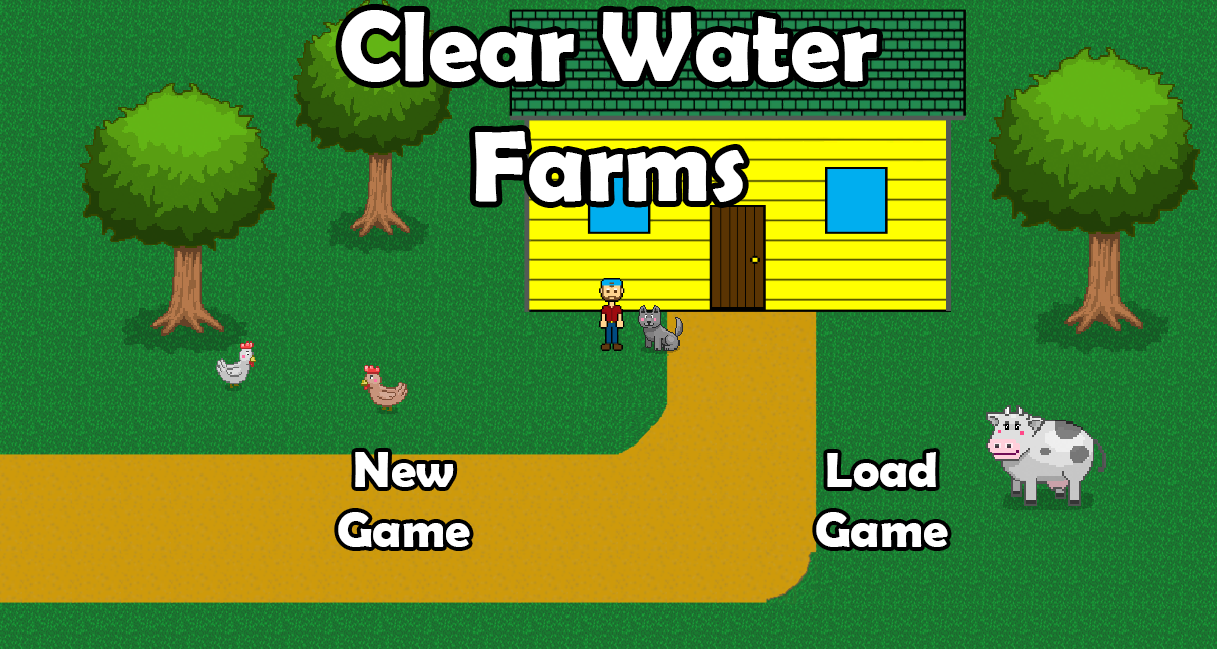
<style>
.page{position:relative;width:1217px;height:649px}
.page>*{position:absolute;margin:0}
.t1{font:100px "BerlinSansFBDemi-Bold";color:#ffffff}
.t2{font:50px "BerlinSansFBDemi-Bold";color:#ffffff}
</style>
<div class="page">
<p class="t1" style="left:341px;top:10px;width:536px;height:192px;text-align:center">Clear Water<br>Farms</p>
<p class="t2" style="left:338px;top:452px;width:132px;height:95px;text-align:center">New <br>Game</p>
<p class="t2" style="left:816px;top:452px;width:132px;height:95px;text-align:center">Load Game</p>
</div>
